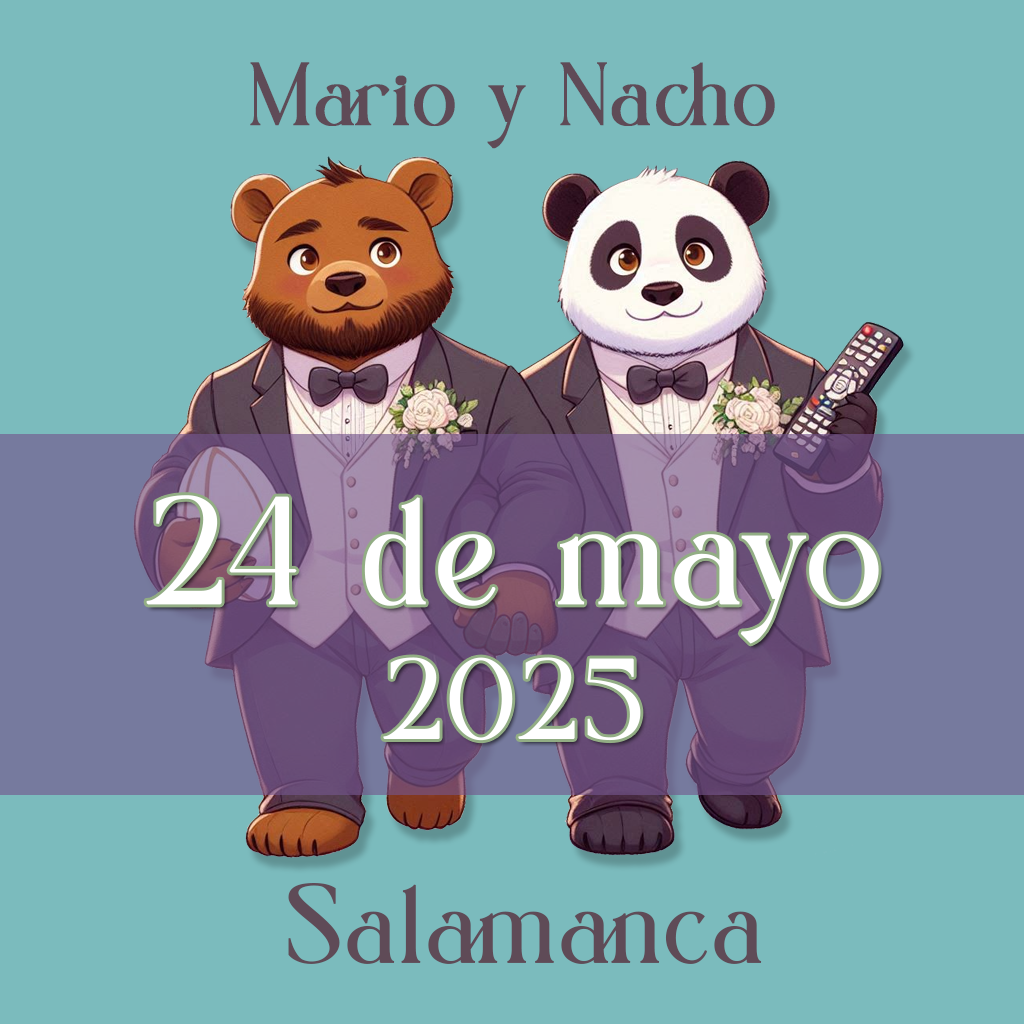
<style>
.page{position:relative;width:1024px;height:1024px;background:#7bbbbd}
.page>*{position:absolute;margin:0}
.t1{font:88.2px "EvelinsRegular";color:#5f4b57;font-weight:bold}
.t2{font:150.2px "EvelinsRegular";color:#ffffff;font-weight:bold;scale:1.03 1}
.t3{font:112.2px "EvelinsRegular";color:#ffffff;font-weight:bold;scale:1.03 1}
.t4{font:109.8px "EvelinsRegular";color:#5f4b57;font-weight:bold}
</style>
<div class="page">
<p class="t1" style="left:250px;top:62px;width:525px;height:87px">Mario y Nacho</p>
<p class="t2" style="left:146px;top:495px;width:733px;height:246px;text-align:center">24 de mayo<br><span class="t3">2025</span></p>
<p class="t4" style="left:288px;top:883px;width:474px;height:81px">Salamanca</p>
</div>
